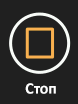
<style>
.page{position:relative;width:78px;height:104px;background:#202020}
.page>*{position:absolute;margin:0}
.t1{font:12px "Calibri-Bold";color:#ffffff}
</style>
<div class="page">
<p class="t1" style="left:25px;top:83px;width:31px;height:11px">Стоп</p>
</div>
